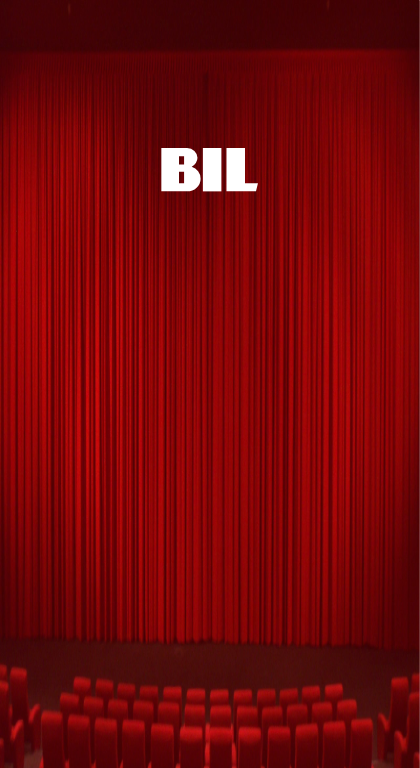
<style>
.page{position:relative;width:420px;height:768px}
.page>*{position:absolute;margin:0}
.t1{font:54px "DayPosterBlack";color:#ffffff}
</style>
<div class="page">
<p class="t1" style="left:161px;top:148px;width:97px;height:44px">BIL</p>
</div>
